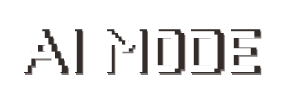
<style>
.page{position:relative;width:288px;height:99px;background:#ffffff}
.page>*{position:absolute;margin:0}
.t1{font:58.3px "PixelGameFont";text-transform:uppercase}
.t2{font:54.2px "PixelGameFont";letter-spacing:0.04em;color:#ffffff;text-transform:uppercase}
</style>
<div class="page">
<p class="t1" style="left:24px;top:29px;width:237px;height:44px">ai mOde</p>
<p class="t2" style="left:21px;top:31px;width:234px;height:41px">ai mOde</p>
<p class="t1" style="left:25px;top:31px;width:237px;height:44px">ai mOde</p>
</div>
